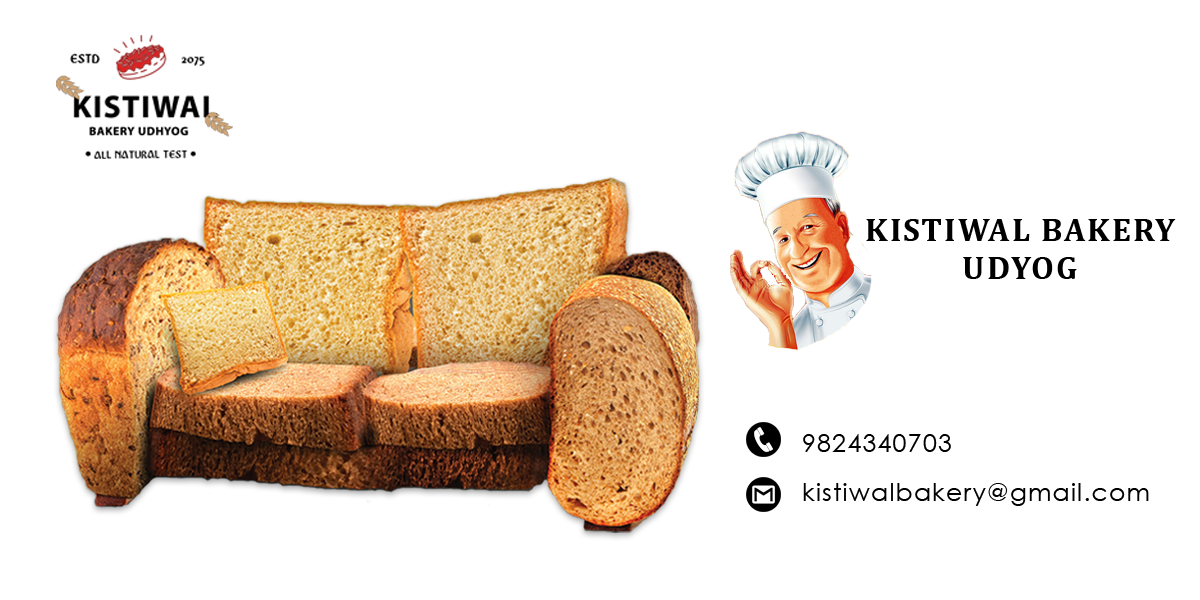
<style>
.page{position:relative;width:1200px;height:600px;background:#ffffff}
.page>*{position:absolute;margin:0}
.t1{font:33.3px/37.5px "Cambria-Bold";letter-spacing:0.05em;color:#000000}
.t2{font:25px "CenturyGothic";letter-spacing:0.05em;color:#000000}
</style>
<div class="page">
<p class="t1" style="left:866px;top:219px;width:310px;height:60px;text-align:center">KISTIWAL BAKERY UDYOG</p>
<p class="t2" style="left:803px;top:434px;width:148px;height:18px">9824340703</p>
<p class="t2" style="left:803px;top:483px;width:346px;height:23px">kistiwalbakery@gmail.com</p>
</div>
